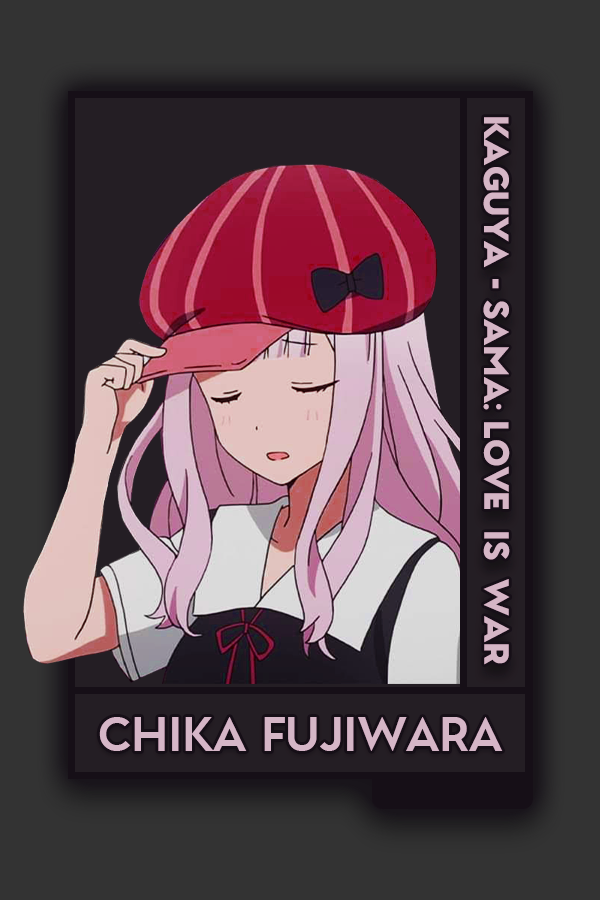
<style>
.page{position:relative;width:600px;height:900px;background:#333333}
.page>*{position:absolute;margin:0}
.t1{font:33.3px "GarnetCapitalsBlack-Regular";color:#d5b6c6}
.t2{font:45.8px "GarnetCapitals-Regular";color:#d5b6c7}
</style>
<div class="page">
<p class="t1" style="left:483px;top:117px;width:27px;height:548px;rotate:90deg">Kaguya - Sama: Love  IS  WAR</p>
<p class="t2" style="left:99px;top:717px;width:404px;height:34px">Chika Fujiwara</p>
</div>
